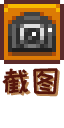
<style>
.page{position:relative;width:64px;height:128px;background:#ffffff}
.page>*{position:absolute;margin:0}
.t1{font:30px "HappyZcool-2016";color:#56160c}
.t2{font:30px "HappyZcool-2016"}
</style>
<div class="page">
<p class="t1" style="left:2px;top:68px;width:56px;height:27px">截图</p>
<p class="t2" style="left:4px;top:70px;width:56px;height:27px">截图</p>
</div>
